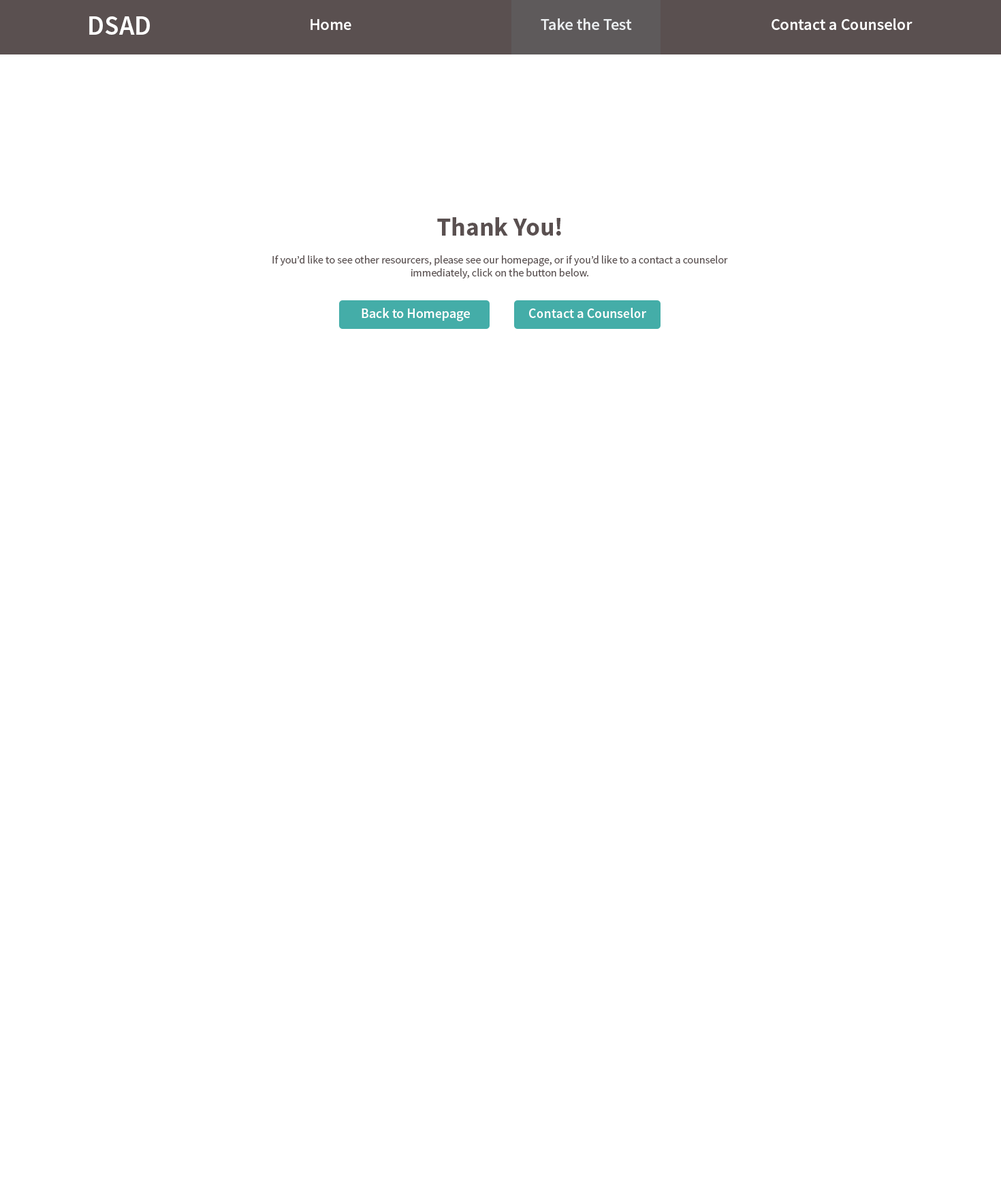
<style>
.page{position:relative;width:1001px;height:1191px;background:#ffffff}
.page>*{position:absolute;margin:0}
.t1{font:27.2px "SourceSansPro-Semibold";color:#ffffff}
.t2{font:16.3px "SourceSansPro-Semibold";color:#ffffff}
.t3{font:10.9px "SourceSansPro-Regular";color:#5a5050}
.t4{font:25.9px/32.7px "SourceSansPro-Bold";color:#5a5050}
.t5{font:13.6px "SourceSansPro-Semibold";color:#ffffff}
</style>
<div class="page">
<p class="t1" style="left:89px;top:16px;width:61px;height:19px">DSAD</p>
<p class="t2" style="left:311px;top:19px;width:40px;height:11px">Home</p>
<p class="t2" style="left:541px;top:18px;width:91px;height:12px">Take the Test</p>
<p class="t2" style="left:772px;top:18px;width:141px;height:12px">Contact a Counselor</p>
<p class="t3" style="left:272px;top:217px;width:456px;height:62px;text-align:center"><span class="t4">Thank You!<br></span>If you’d like to see other resourcers, please see our homepage, or if you’d like to a contact a counselor immediately, click on the button below.</p>
<p class="t5" style="left:362px;top:308px;width:108px;height:13px">Back to Homepage</p>
<p class="t5" style="left:529px;top:308px;width:117px;height:10px">Contact a Counselor</p>
</div>
